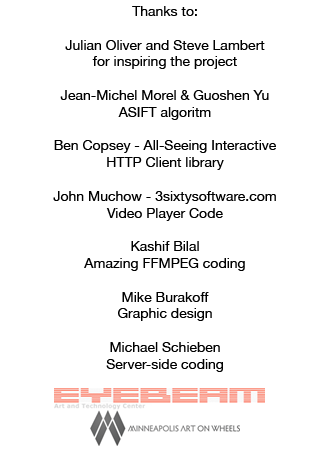
<style>
.page{position:relative;width:320px;height:460px;background:#ffffff}
.page>*{position:absolute;margin:0}
.t1{font:14px "HelveticaNeue";color:#000000}
</style>
<div class="page">
<p class="t1" style="left:53px;top:6px;width:223px;height:366px;text-align:center">Thanks to:<br><br>Julian Oliver and Steve Lambert<br>for inspiring the project<br><br>Jean-Michel Morel &amp; Guoshen Yu<br>ASIFT algoritm<br><br>Ben Copsey - All-Seeing Interactive<br>HTTP Client library<br><br>John Muchow - 3sixtysoftware.com<br>Video Player Code<br><br>Kashif Bilal<br>Amazing FFMPEG coding<br><br>Mike Burakoff<br>Graphic design<br><br>Michael Schieben<br>Server-side coding</p>
</div>
